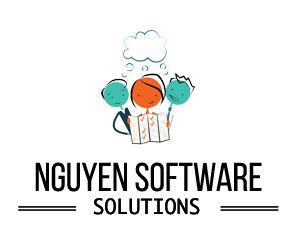
<style>
.page{position:relative;width:300px;height:240px;background:#ffffff}
.page>*{position:absolute;margin:0}
.t1{font:40px "BebasNeueRegular";color:#000000}
.t2{font:20px "Monaco";color:#000000}
</style>
<div class="page">
<p class="t1" style="left:35px;top:162px;width:227px;height:30px">Nguyen Software</p>
<p class="t2" style="left:93px;top:198px;width:107px;height:17px">SOLUTIONS</p>
</div>
